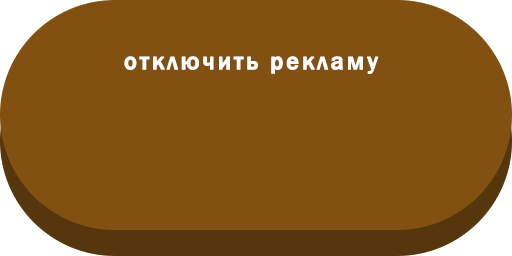
<style>
.page{position:relative;width:512px;height:256px;background:#825112}
.page>*{position:absolute;margin:0}
.t1{font:24.8px "FranklinGothic-Medium";letter-spacing:0.1em;color:#ffffff;font-weight:bold}
</style>
<div class="page">
<p class="t1" style="left:124px;top:56px;width:255px;height:18px">отключить рекламу</p>
</div>
